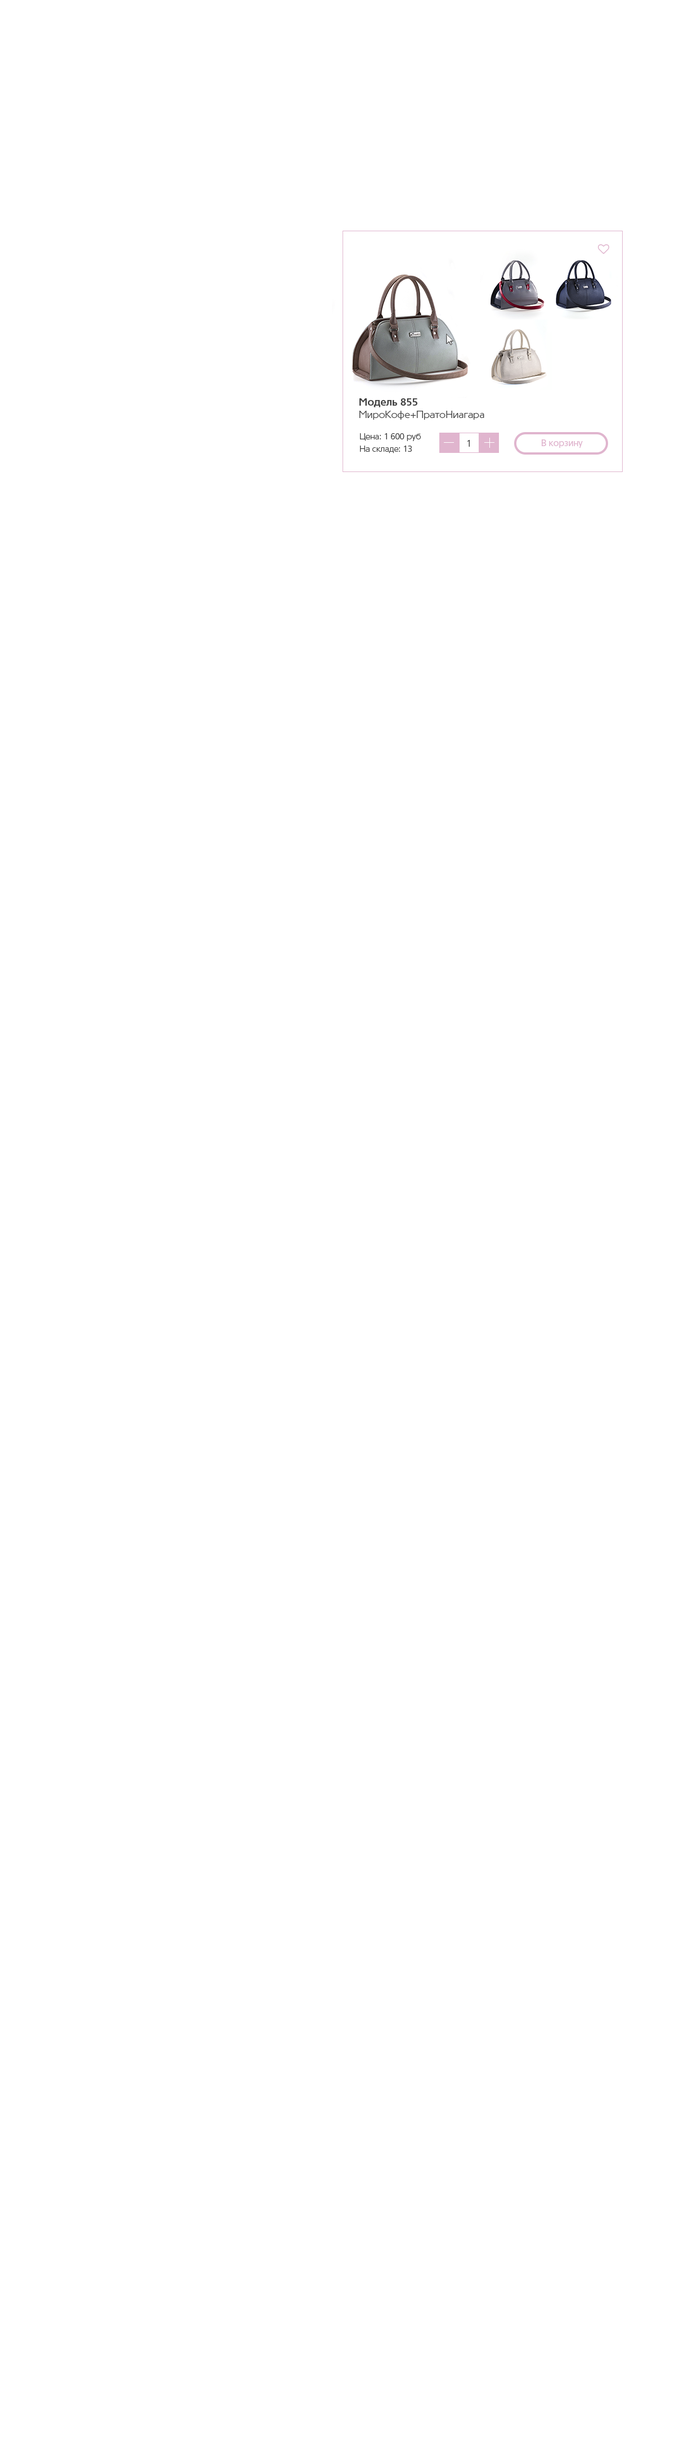
<style>
.page{position:relative;width:675px;height:2444px;background:#ffffff}
.page>*{position:absolute;margin:0}
.t1{font:10.1px/12.4px "TornadoCyr-Light";color:#414141}
.t2{font:10.1px/12.4px "TornadoCyr-Bold";color:#414141}
.t3{font:8.4px/12.4px "TornadoCyr-Light";color:#414141}
.t4{font:9px "TornadoCyr-Light";color:#414141}
.t5{font:9px "TornadoCyr-Regular";color:#e0b5ce}
</style>
<div class="page">
<p class="t1" style="left:359px;top:398px;width:125px;height:22px"><span class="t2">Модель 855 <br></span>МироКофе+ПратоНиагара</p>
<p class="t3" style="left:360px;top:433px;width:61px;height:20px">Цена: 1 600 руб<br>На складе: 13</p>
<p class="t4" style="left:467px;top:440px;width:3px;height:7px">1</p>
<p class="t5" style="left:542px;top:439px;width:41px;height:9px">В корзину</p>
</div>
